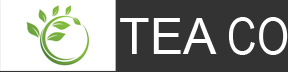
<style>
.page{position:relative;width:288px;height:72px;background:#333333}
.page>*{position:absolute;margin:0}
.t1{font:50px "ArialMT";color:#ffffff}
.t2{font:50px "ArialNarrow";color:#ffffff}
</style>
<div class="page">
<p class="t1" style="left:120px;top:17px;width:168px;height:38px">TEA <span class="t2">CO</span></p>
</div>
